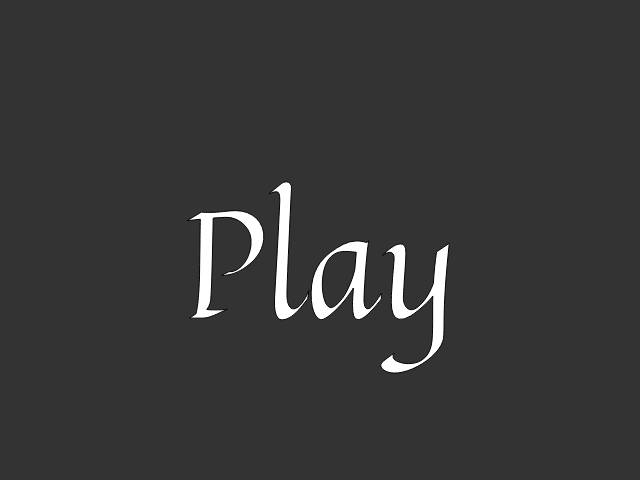
<style>
.page{position:relative;width:640px;height:480px;background:#333333}
.page>*{position:absolute;margin:0}
.t1{font:150px "Quintessential-Regular";color:#ffffff}
</style>
<div class="page">
<p class="t1" style="left:186px;top:180px;width:265px;height:195px">Play</p>
</div>
